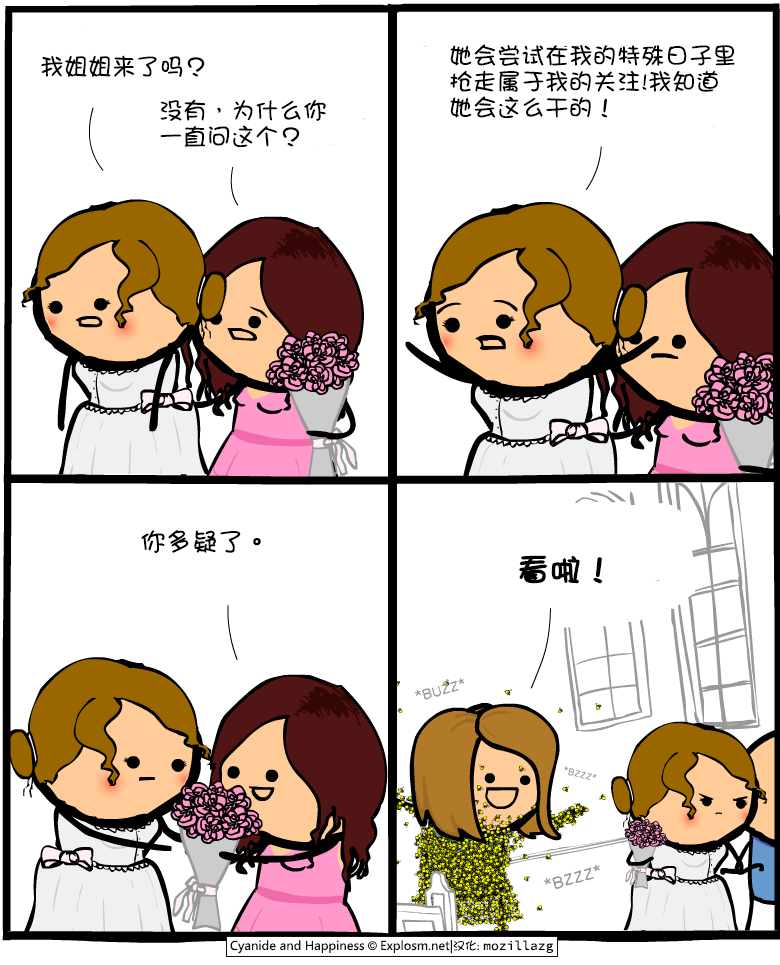
<style>
.page{position:relative;width:780px;height:965px;background:#ffffff}
.page>*{position:absolute;margin:0}
.t1{font:24px/26px "DFGirl";color:#000000}
.t2{font:24px "DFGirl";color:#000000}
.t3{font:26px "DFGirl";color:#000000}
.t4{font:32px "DFGirl";color:#000000;font-weight:bold}
</style>
<div class="page">
<p class="t1" style="left:450px;top:44px;width:285px;height:74px">她会尝试在我的特殊日子里<br>抢走属于我的关注!我知道<br>她会这么干的！</p>
<p class="t2" style="left:41px;top:55px;width:164px;height:23px">我姐姐来了吗？</p>
<p class="t1" style="left:160px;top:99px;width:166px;height:48px">没有，为什么你<br>一直问这个？</p>
<p class="t3" style="left:141px;top:530px;width:120px;height:24px">你多疑了。</p>
<p class="t4" style="left:519px;top:555px;width:84px;height:29px">看啦！</p>
</div>
